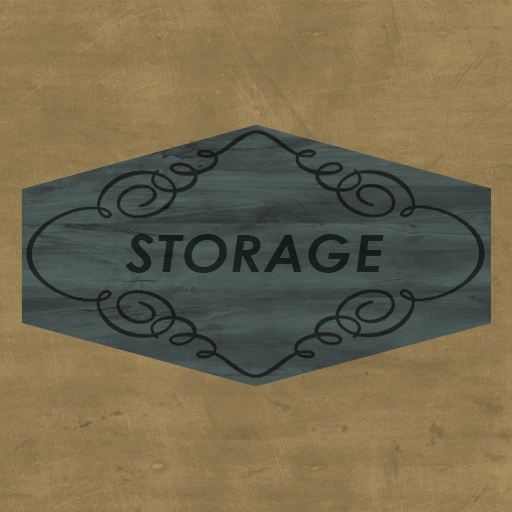
<style>
.page{position:relative;width:512px;height:512px}
.page>*{position:absolute;margin:0}
.t1{font:52px "CenturyGothic-BoldItalic";letter-spacing:0.025em;color:#191f1d;text-transform:uppercase;scale:1.07 1}
</style>
<div class="page">
<p class="t1" style="left:125px;top:234px;width:259px;height:39px">Storage</p>
</div>
